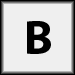
<style>
.page{position:relative;width:75px;height:75px;background:#efefef}
.page>*{position:absolute;margin:0}
.t1{font:48px "MyriadPro-Bold";color:#000000}
</style>
<div class="page">
<p class="t1" style="left:27px;top:21px;width:24px;height:33px">B</p>
</div>
